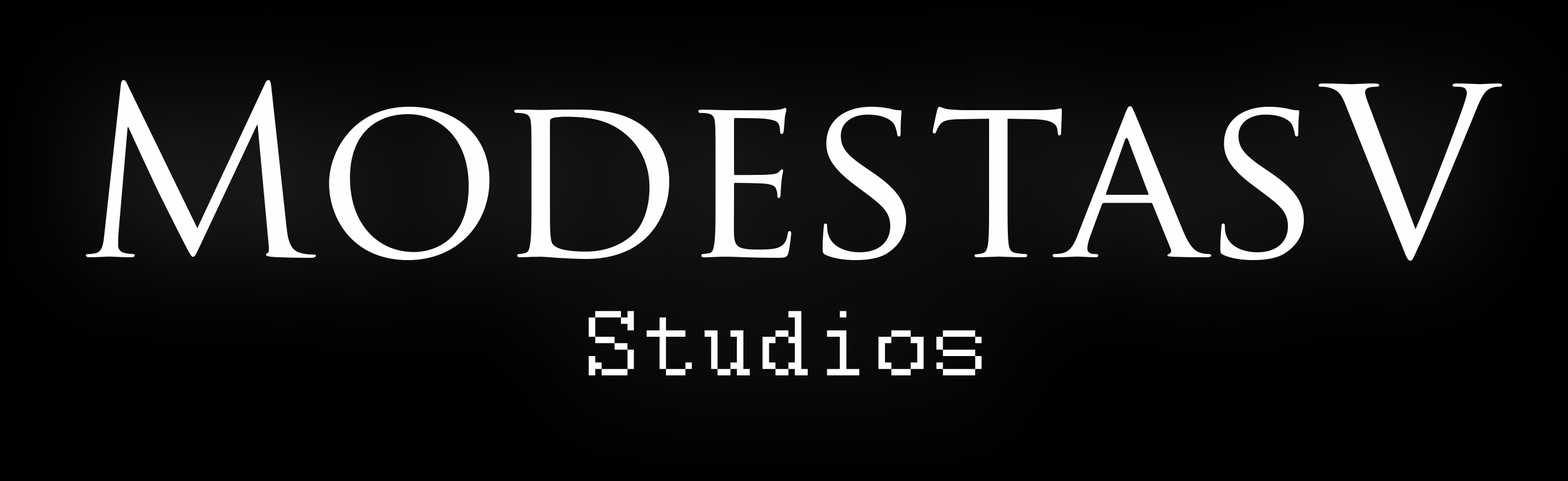
<style>
.page{position:relative;width:1568px;height:481px}
.page>*{position:absolute;margin:0}
.t1{font:230.1px "TrajanPro-Regular";color:#fffefe}
.t2{font:103.1px "Courier";color:#fffefe}
</style>
<div class="page">
<p class="t1" style="left:86px;top:80px;width:1416px;height:181px">ModestasV</p>
<p class="t2" style="left:589px;top:311px;width:393px;height:65px">Studios</p>
</div>
